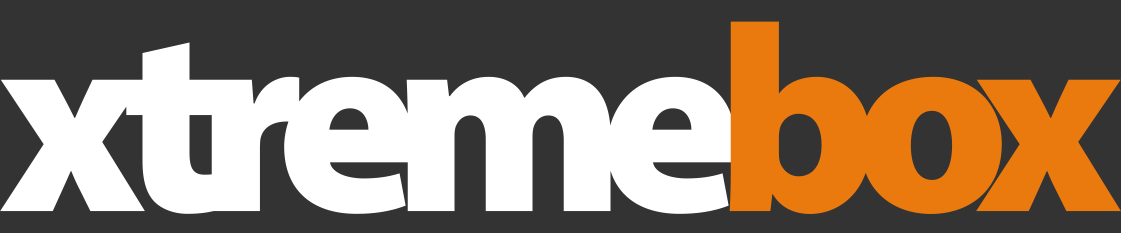
<style>
.page{position:relative;width:1121px;height:233px;background:#333333}
.page>*{position:absolute;margin:0}
.t1{font:266.7px "MyriadConceptRoman-Black";letter-spacing:-0.1em;color:#ffffff}
.t2{font:266.7px "MyriadConceptRoman-Black";letter-spacing:-0.1em;color:#ea7a0e}
</style>
<div class="page">
<p class="t1" style="left:0px;top:21px;width:1121px;height:193px">xtreme<span class="t2">box</span></p>
</div>
